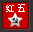
<style>
.page{position:relative;width:33px;height:32px;background:#c50000}
.page>*{position:absolute;margin:0}
.t1{font:10.4px "SimSun";color:#ffffff}
</style>
<div class="page">
<p class="t1" style="left:6px;top:4px;width:19px;height:8px">红五</p>
</div>
